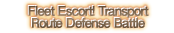
<style>
.page{position:relative;width:174px;height:33px;background:#ffffff}
.page>*{position:absolute;margin:0}
.t1{font:13px/12px "FutoGoB101Pr5-Bold";letter-spacing:-0.08em;color:#7c664e;font-weight:bold}
</style>
<div class="page">
<p class="t1" style="left:28px;top:6px;width:121px;height:22px;text-align:center">Fleet Escort! Transport<br>Route Defense Battle</p>
</div>
